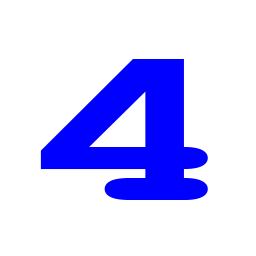
<style>
.page{position:relative;width:256px;height:256px;background:#ffffff}
.page>*{position:absolute;margin:0}
.t1{font:222.5px "CourierNewPS-BoldMT";color:#0000ff;scale:1.73 1}
</style>
<div class="page">
<p class="t1" style="left:40px;top:59px;width:168px;height:141px">4</p>
</div>
